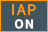
<style>
.page{position:relative;width:48px;height:32px;background:#415561}
.page>*{position:absolute;margin:0}
.t1{font:16px "SourceSansRoman-Regular";letter-spacing:0.08em;color:#ff9c00}
.t2{font:14px "SourceSansRoman-Bold";letter-spacing:0.08em;color:#ffffff}
</style>
<div class="page">
<p class="t1" style="left:12px;top:4px;width:24px;height:12px">IAP</p>
<p class="t2" style="left:15px;top:19px;width:18px;height:10px">ON</p>
</div>
